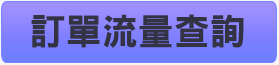
<style>
.page{position:relative;width:279px;height:65px}
.page>*{position:absolute;margin:0}
.t1{font:36.2px "DFNHei-W9-WIN-BF";color:#333344}
</style>
<div class="page">
<p class="t1" style="left:31px;top:14px;width:213px;height:34px">訂單流量查詢</p>
</div>
